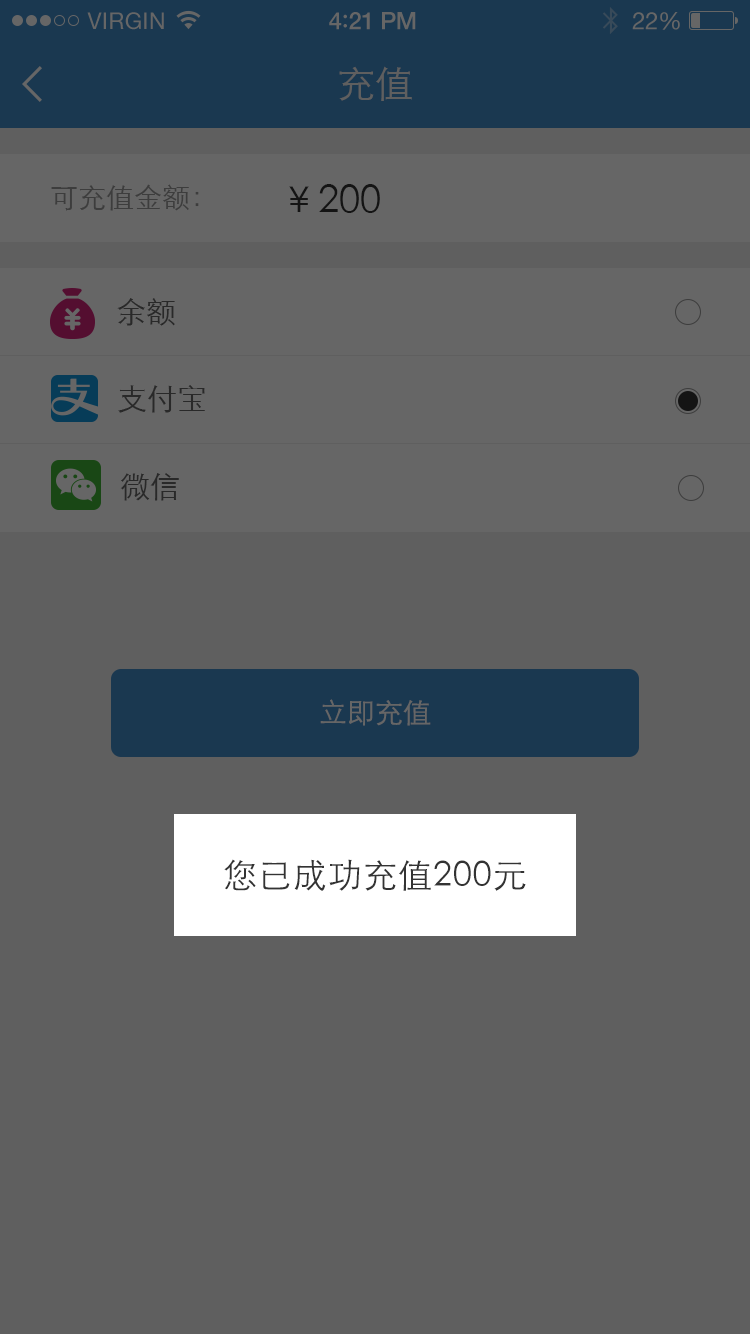
<style>
.page{position:relative;width:750px;height:1334px;background:#5f5f5f}
.page>*{position:absolute;margin:0}
.t1{font:23px "HelveticaNeue";letter-spacing:0.02em;color:#666666}
.t2{font:24px "HelveticaNeue-Medium";letter-spacing:-0.02em;color:#666666}
.t3{font:26px "Avenir-Medium";letter-spacing:-0.02em;color:#666666}
.t4{font:24px "HelveticaNeue";letter-spacing:-0.02em;color:#666666}
.t5{font:38px "STXihei";color:#5f5f5f}
.t6{font:28px "STXihei";color:#3d3d3d}
.t7{font:38px "STXihei";color:#141414}
.t8{font:30px "STXihei";color:#292929}
.t9{font:28px "STXihei";color:#666666}
.t10{font:34px "STXihei";letter-spacing:0.03em;color:#333333}
</style>
<div class="page">
<p class="t1" style="left:87px;top:12px;width:77px;height:18px">VIRGIN</p>
<p class="t2" style="left:329px;top:12px;width:87px;height:18px">4<span class="t3">:</span>21 PM</p>
<p class="t4" style="left:632px;top:12px;width:48px;height:18px">22%</p>
<p class="t5" style="left:339px;top:66px;width:73px;height:35px">充值</p>
<p class="t6" style="left:51px;top:184px;width:148px;height:27px">可充值金额：</p>
<p class="t7" style="left:289px;top:184px;width:91px;height:29px">￥200</p>
<p class="t8" style="left:117px;top:298px;width:58px;height:28px">余额</p>
<p class="t8" style="left:118px;top:385px;width:87px;height:28px">支付宝</p>
<p class="t8" style="left:120px;top:473px;width:59px;height:28px">微信</p>
<p class="t9" style="left:320px;top:699px;width:111px;height:27px">立即充值</p>
<p class="t10" style="left:224px;top:859px;width:302px;height:32px">您已成功充值200元</p>
</div>
